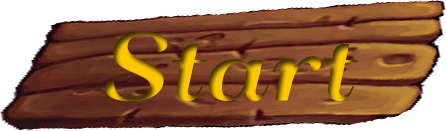
<style>
.page{position:relative;width:446px;height:131px}
.page>*{position:absolute;margin:0}
.t1{font:84px "QumpellkaNo12";font-weight:bold}
</style>
<div class="page">
<p class="t1" style="left:104px;top:31px;width:254px;height:71px">Start</p>
</div>
